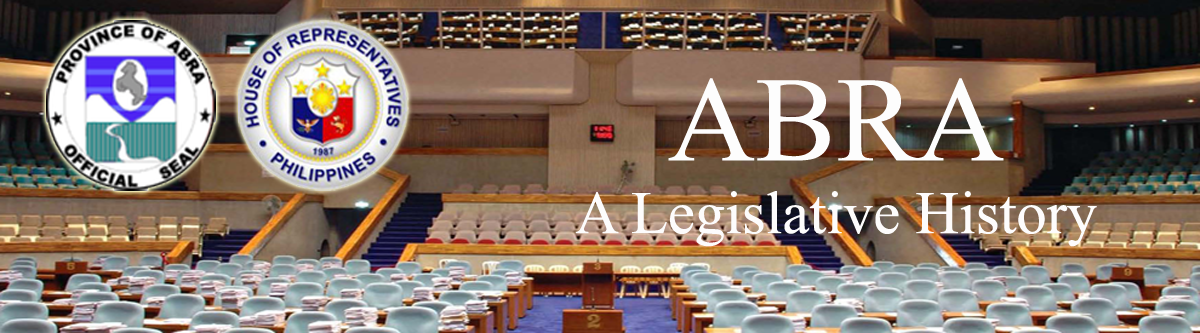
<style>
.page{position:relative;width:1200px;height:333px}
.page>*{position:absolute;margin:0}
.t1{font:60.5px "TimesNewRomanPSMT";color:#fdfcfc}
.t2{font:121.1px "TimesNewRomanPSMT";color:#fdfdfd}
</style>
<div class="page">
<p class="t1" style="left:575px;top:78px;width:522px;height:169px;text-align:center"><span class="t2">ABRA<br></span>A Legislative History</p>
</div>
